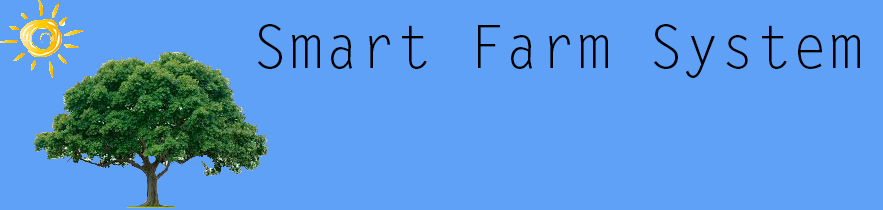
<style>
.page{position:relative;width:883px;height:210px;background:#60a1f8}
.page>*{position:absolute;margin:0}
.t1{font:60px "LetterGothicStd";color:#000000}
</style>
<div class="page">
<p class="t1" style="left:258px;top:24px;width:602px;height:54px">Smart Farm System</p>
</div>
